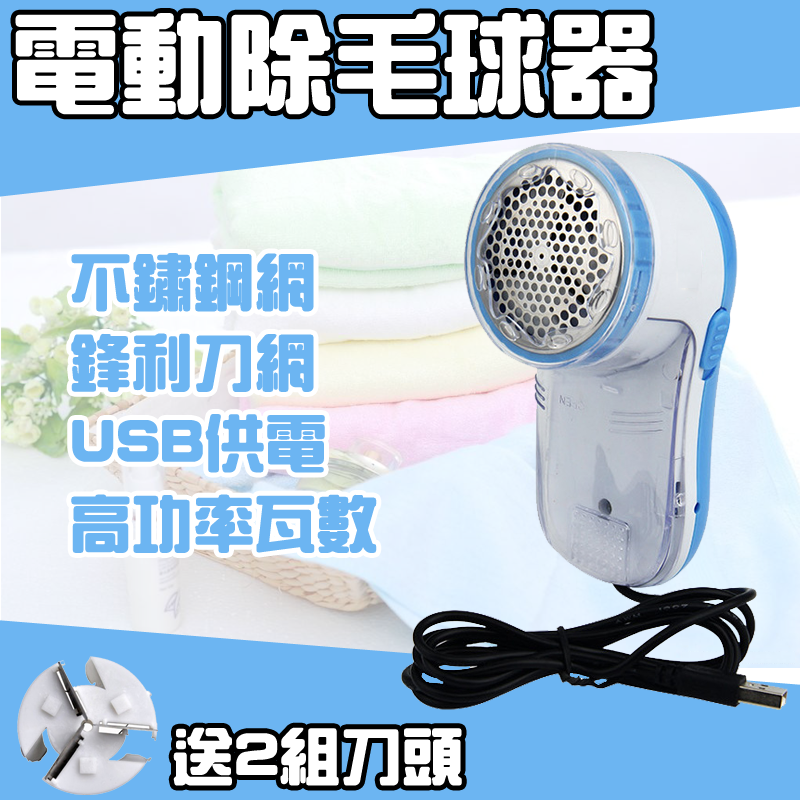
<style>
.page{position:relative;width:800px;height:800px;background:#6cb5f2}
.page>*{position:absolute;margin:0}
.t1{font:104.3px "HanWangZonYi";color:#ffffff;font-weight:bold}
.t2{font:60px "HanWangZonYi";color:#6cb5f2;font-weight:bold}
.t3{font:60px "HanWangZonYi";color:#ffffff;font-weight:bold}
</style>
<div class="page">
<p class="t1" style="left:15px;top:13px;width:638px;height:102px">電動除毛球器</p>
<p class="t2" style="left:71px;top:253px;width:306px;height:300px">不鏽鋼網<br>鋒利刀網<br>USB供電<br>高功率瓦數</p>
<p class="t3" style="left:173px;top:727px;width:289px;height:59px">送2組刀頭</p>
</div>
